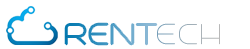
<style>
.page{position:relative;width:250px;height:49px;background:#ffffff}
.page>*{position:absolute;margin:0}
.t1{font:36.4px "Trench-Thin";text-transform:uppercase;scale:1.11 1}
</style>
<div class="page">
<p class="t1" style="left:65px;top:23px;width:155px;height:22px">RENTECH</p>
<p class="t1" style="left:65px;top:23px;width:92px;height:22px">RENT</p>
</div>
